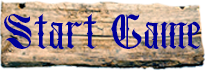
<style>
.page{position:relative;width:205px;height:70px}
.page>*{position:absolute;margin:0}
.t1{font:50px "Blackburr";color:#000099}
</style>
<div class="page">
<p class="t1" style="left:4px;top:13px;width:197px;height:36px">Start Game</p>
</div>
